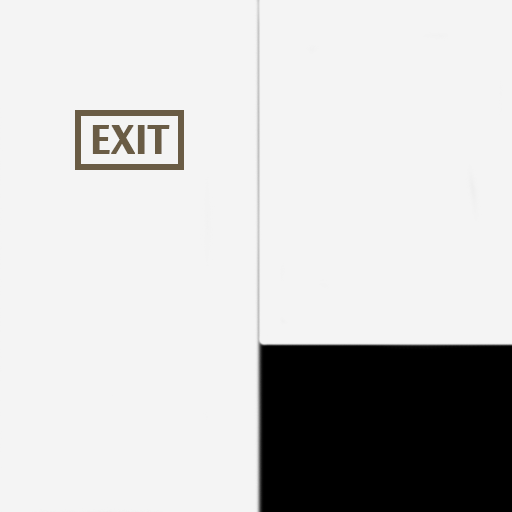
<style>
.page{position:relative;width:512px;height:512px;background:#f4f4f4}
.page>*{position:absolute;margin:0}
.t1{font:62.4px "MoolBoran";color:#6a5c45;font-weight:bold;scale:0.92 1}
</style>
<div class="page">
<p class="t1" style="left:92px;top:125px;width:78px;height:29px">EXIT</p>
</div>
